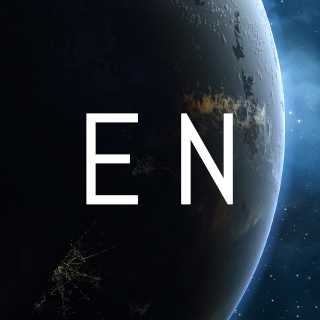
<style>
.page{position:relative;width:320px;height:320px}
.page>*{position:absolute;margin:0}
.t1{font:128px "Abel-Regular";letter-spacing:0.2em;color:#ffffff;text-transform:uppercase;font-weight:bold}
</style>
<div class="page">
<p class="t1" style="left:86px;top:113px;width:147px;height:92px">EN</p>
</div>
